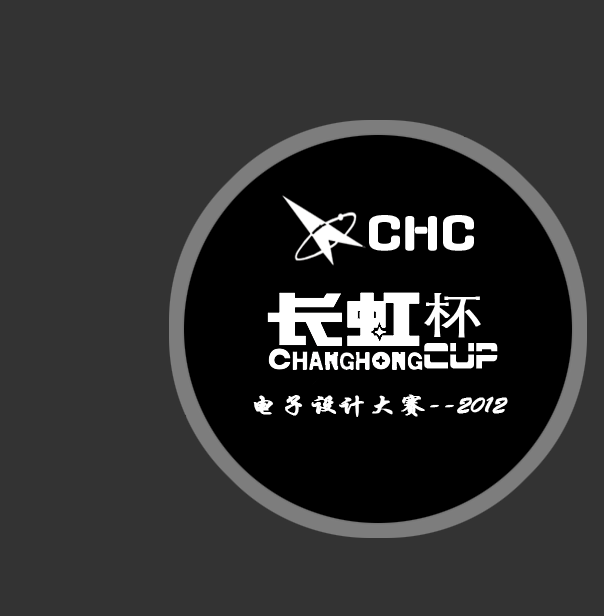
<style>
.page{position:relative;width:604px;height:616px;background:#333333}
.page>*{position:absolute;margin:0}
.t1{font:48px "AxaxaxRg-Bold";color:#ffffff;font-weight:bold}
.t2{font:48px "STXihei";color:#ffffff;font-weight:bold;scale:1.2 1}
.t3{font:36px "BorgNine-Regular";color:#ffffff;font-weight:bold;scale:0.67 1}
.t4{font:24px "STXingkai";color:#ffffff;font-weight:bold;scale:1.2 1}
</style>
<div class="page">
<p class="t1" style="left:369px;top:215px;width:105px;height:36px">CHC</p>
<p class="t2" style="left:424px;top:293px;width:57px;height:45px">杯</p>
<p class="t3" style="left:424px;top:343px;width:74px;height:26px">CUP</p>
<p class="t4" style="left:253px;top:394px;width:255px;height:23px">电子设计大赛--2012</p>
</div>
